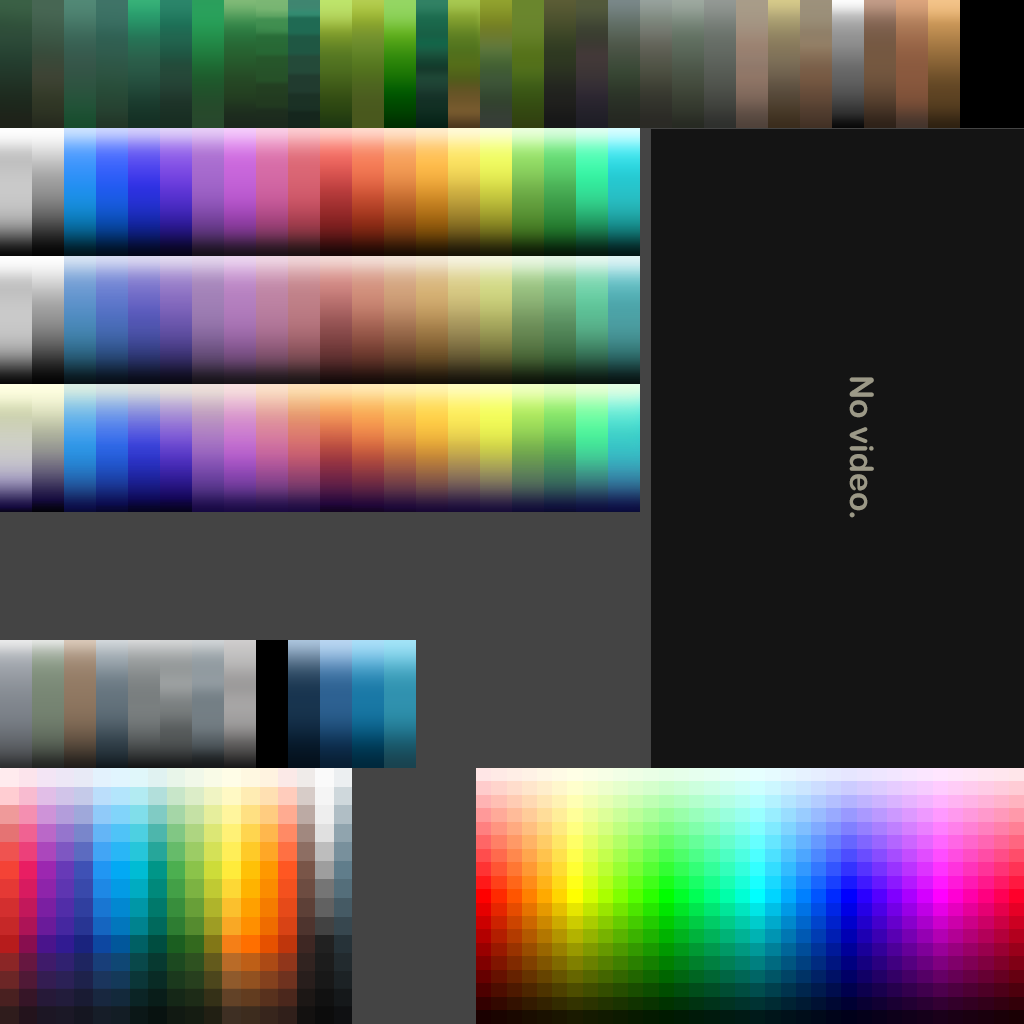
<style>
.page{position:relative;width:1024px;height:1024px;background:#141414}
.page>*{position:absolute;margin:0}
.t1{font:32.2px "ArialRoundedMTBold";color:#9c9987}
</style>
<div class="page">
<p class="t1" style="left:849px;top:377px;width:25px;height:141px;rotate:90deg">No video.</p>
</div>
